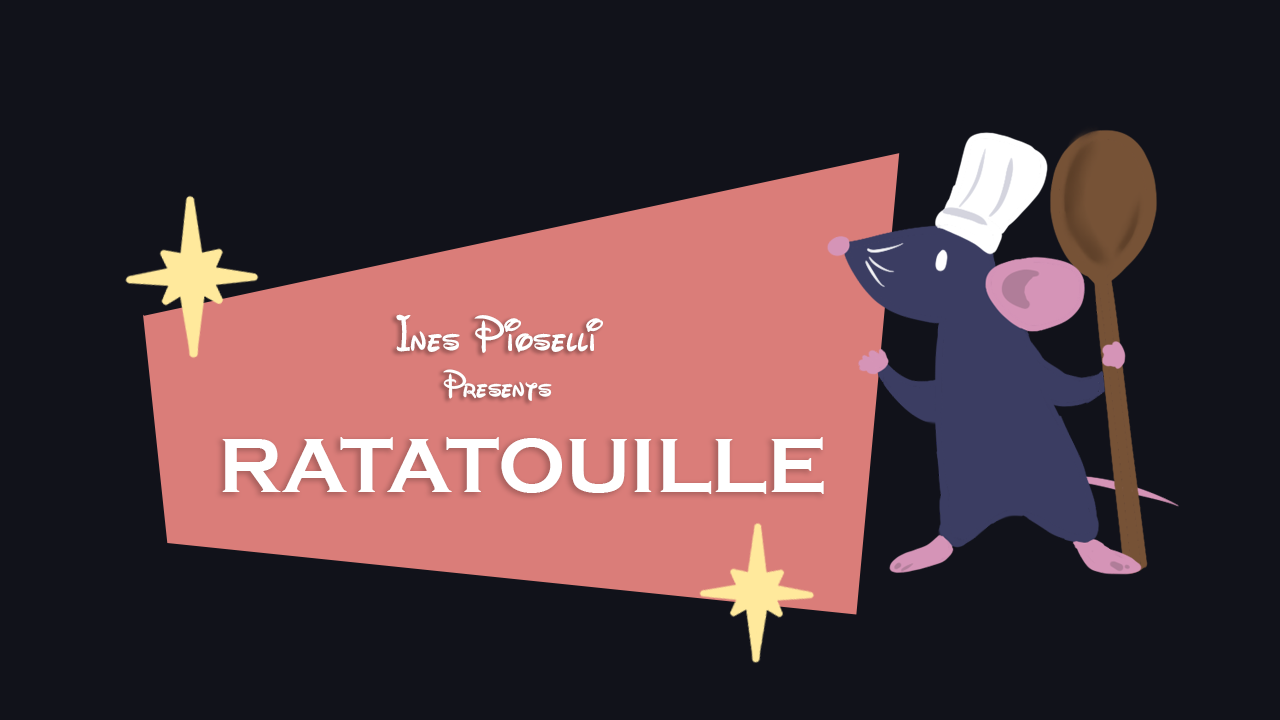
<style>
.page{position:relative;width:1280px;height:720px;background:#11121a}
.page>*{position:absolute;margin:0}
.t1{font:50px "Waltograph";color:#ffffff}
.t2{font:38.2px "Waltograph";color:#ffffff}
.t3{font:78.7px "CopperplateGothic-Bold";color:#ffffff}
</style>
<div class="page">
<p class="t1" style="left:396px;top:314px;width:207px;height:87px;text-align:center">Ines Pioselli<br><span class="t2">Presents</span></p>
<p class="t3" style="left:222px;top:437px;width:602px;height:57px">RATATOUILLE</p>
</div>
